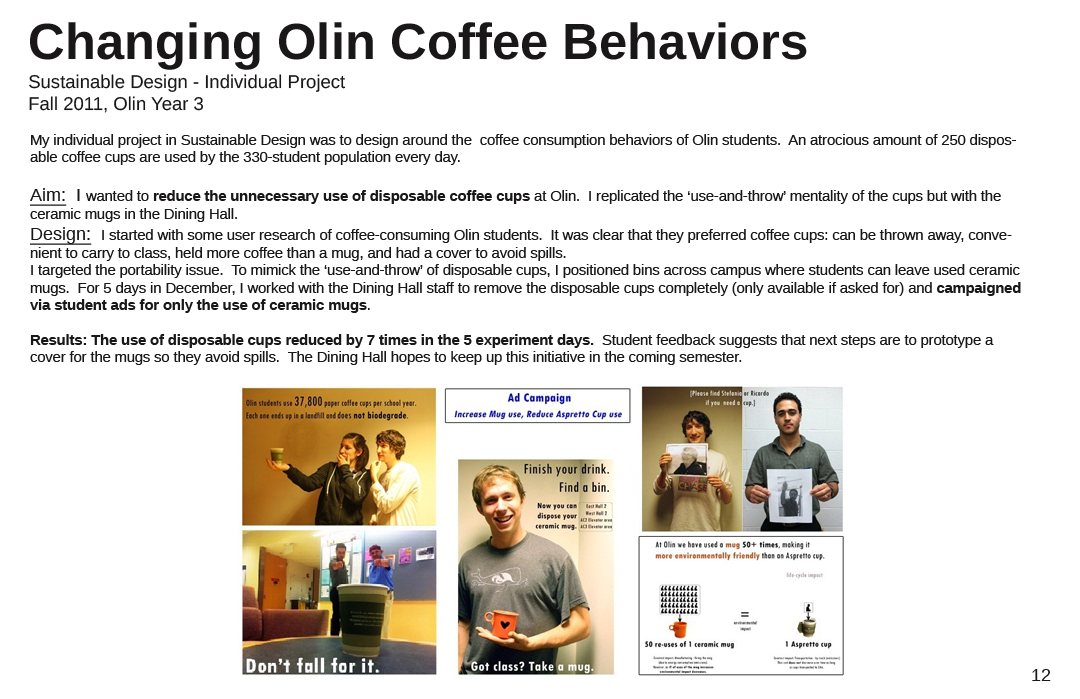
<style>
.page{position:relative;width:1080px;height:699px;background:#ffffff}
.page>*{position:absolute;margin:0}
.t1{font:18.5px "LiberationSans";color:#191717}
.t2{font:50.9px "LiberationSans-Bold";color:#191717}
.t3{font:14.5px "LiberationSans";color:#191717}
.t4{font:18px "LiberationSans";color:#191717;text-decoration:underline}
.t5{font:18px "LiberationSans";color:#191717}
.t6{font:14.5px "LiberationSans-Bold";color:#191717}
</style>
<div class="page">
<p class="t1" style="left:29px;top:22px;width:778px;height:91px"><span class="t2">Changing Olin Coffee Behaviors<br><br></span>Sustainable Design - Individual Project<br>Fall 2011, Olin Year 3</p>
<p class="t3" style="left:30px;top:134px;width:991px;height:231px">My individual project in Sustainable Design was to design around the  coffee consumption behaviors of Olin students.  An atrocious amount of 250 disposable coffee cups are used by the 330-student population every day.<br><br><span class="t4">Aim:</span><span class="t5">  I </span>wanted to <span class="t6">reduce the unnecessary use of disposable coffee cups </span>at Olin.  I replicated the ‘use-and-throw’ mentality of the cups but with the ceramic mugs in the Dining Hall.   <br><span class="t4">Design:  </span>I started with some user research of coffee-consuming Olin students.  It was clear that they preferred coffee cups: can be thrown away, convenient to carry to class, held more coffee than a mug, and had a cover to avoid spills.<br>I targeted the portability issue.  To mimick the ‘use-and-throw’ of disposable cups, I positioned bins across campus where students can leave used ceramic mugs.  For 5 days in December, I worked with the Dining Hall staff to remove the disposable cups completely (only available if asked for) and <span class="t6">campaigned via student ads for only the use of ceramic mugs</span>.  <br><br><span class="t6">Results: The use of disposable cups reduced by 7 times in the 5 experiment days.  </span>Student feedback suggests that next steps are to prototype a cover for the mugs so they avoid spills.  The Dining Hall hopes to keep up this initiative in the coming semester.</p>
<p class="t5" style="left:1032px;top:669px;width:19px;height:12px">12</p>
</div>
